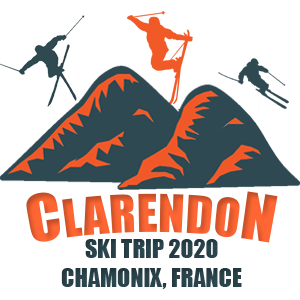
<style>
.page{position:relative;width:300px;height:300px;background:#ffffff}
.page>*{position:absolute;margin:0}
.t1{font:48px "Impact";color:#ff6633}
.t2{font:60px "Impact";color:#ff6633}
.t3{font:24px "Impact";color:#2e4951}
</style>
<div class="page">
<p class="t1" style="left:26px;top:191px;width:252px;height:52px"><span class="t2">C</span>LARENDO<span class="t2">N</span></p>
<p class="t3" style="left:61px;top:239px;width:181px;height:50px;text-align:center">SKI TRIP 2020 <br>CHAMONIX, FRANCE</p>
</div>
